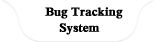
<style>
.page{position:relative;width:154px;height:42px;background:#ffffff}
.page>*{position:absolute;margin:0}
.t1{font:12px "IskoolaPota-Bold";color:#000000;font-weight:bold}
.t2{font:10px "IskoolaPota";color:#00ffff}
</style>
<div class="page">
<p class="t1" style="left:45px;top:7px;width:78px;height:12px"><span class="t2">           </span>Bug Tracking</p>
<p class="t1" style="left:59px;top:23px;width:41px;height:12px">System</p>
</div>
